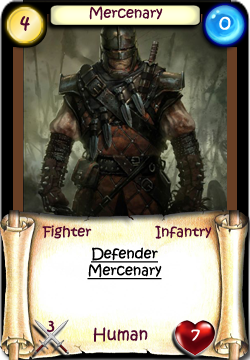
<style>
.page{position:relative;width:250px;height:360px}
.page>*{position:absolute;margin:0}
.t1{font:14px "KristenITC-Regular";color:#51092d}
.t2{font:20px "KristenITC-Regular";color:#51092d}
.t3{font:20px "KristenITC-Regular";color:#ffffff}
.t4{font:14px "KristenITC-Regular";color:#000000;text-decoration:underline}
.t5{font:16px "KristenITC-Regular";color:#51092d}
.t6{font:16px "KristenITC-Regular";color:#fefefe}
</style>
<div class="page">
<p class="t1" style="left:89px;top:6px;width:74px;height:14px">Mercenary</p>
<p class="t2" style="left:20px;top:16px;width:10px;height:15px">4</p>
<p class="t3" style="left:219px;top:16px;width:12px;height:14px">0</p>
<p class="t1" style="left:42px;top:225px;width:50px;height:14px">Fighter</p>
<p class="t1" style="left:155px;top:225px;width:57px;height:14px">Infantry</p>
<p class="t4" style="left:87px;top:247px;width:75px;height:33px;text-align:center">Defender<br>Mercenary</p>
<p class="t5" style="left:47px;top:320px;width:8px;height:12px">3</p>
<p class="t5" style="left:93px;top:327px;width:55px;height:15px">Human</p>
<p class="t6" style="left:191px;top:329px;width:9px;height:12px">7</p>
</div>
